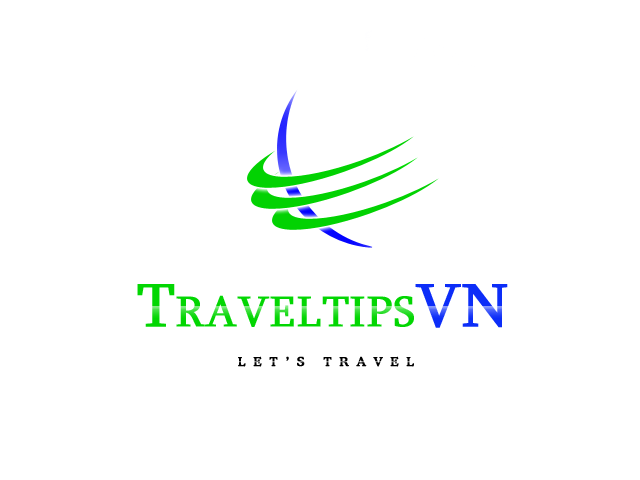
<style>
.page{position:relative;width:640px;height:480px;background:#ffffff}
.page>*{position:absolute;margin:0}
.t1{font:62.5px "font242";color:#02d602;font-variant:small-caps;font-weight:bold}
.t2{font:62.5px "font242";color:#0c2df8;font-variant:small-caps;font-weight:bold}
.t3{font:12.5px "font116";letter-spacing:0.6em;color:#000000;text-transform:uppercase;font-weight:bold}
</style>
<div class="page">
<p class="t1" style="left:137px;top:284px;width:371px;height:44px">Traveltips<span class="t2">VN</span></p>
<p class="t3" style="left:238px;top:356px;width:176px;height:11px">let’s travel</p>
</div>
